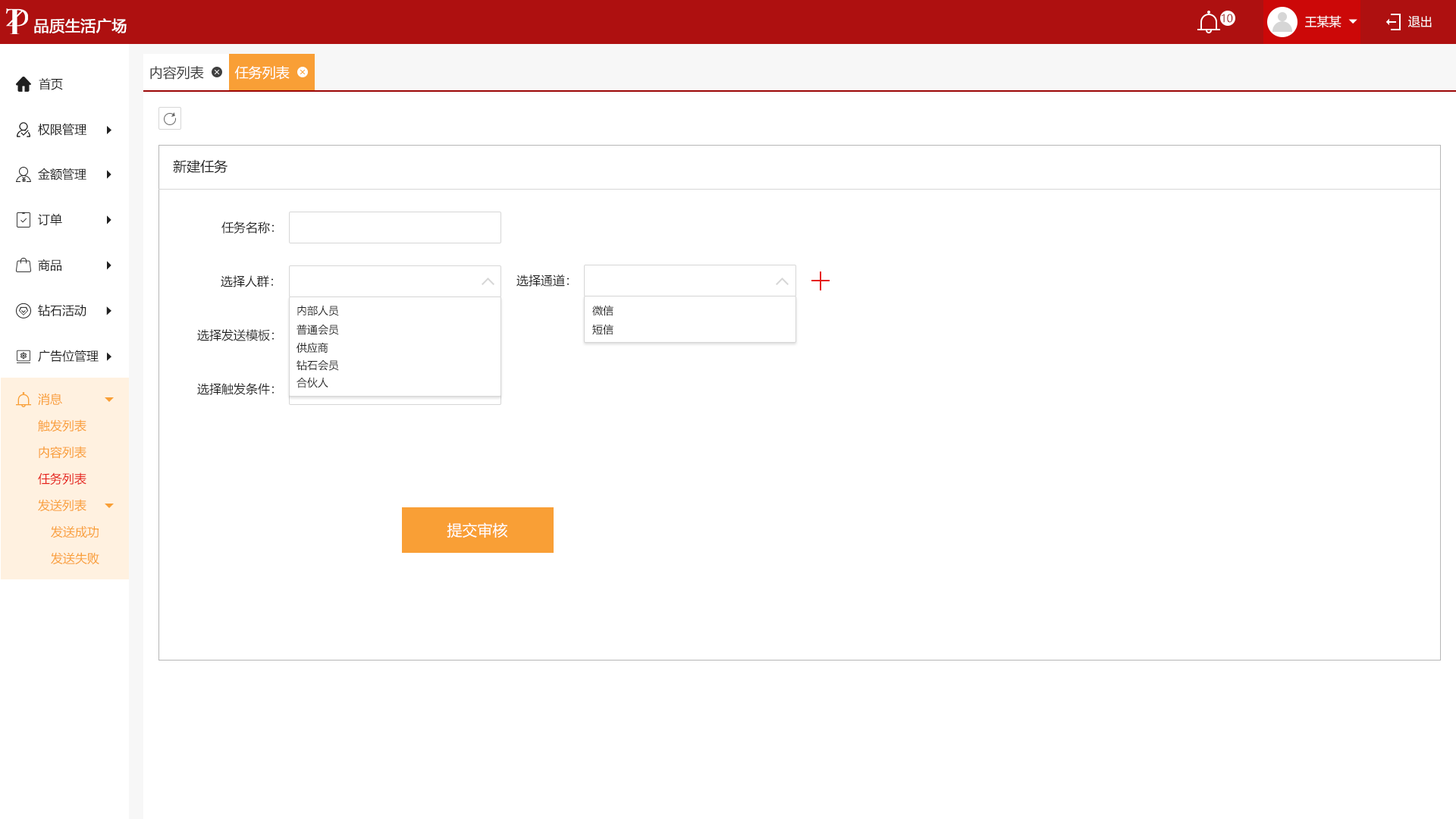
<style>
.page{position:relative;width:1456px;height:819px;background:#ffffff}
.page>*{position:absolute;margin:0}
.t1{font:10.6px "MicrosoftYaHei";color:#9c0606;text-transform:uppercase}
.t2{font:12.1px "MicrosoftYaHei";color:#ffffff;text-transform:uppercase}
.t3{font:15.2px "MicrosoftYaHei";color:#ffffff;text-transform:uppercase;font-weight:bold}
.t4{font:13.6px "MicrosoftYaHei";color:#404040;text-transform:uppercase}
.t5{font:13.6px "MicrosoftYaHei";color:#ffffff;text-transform:uppercase}
.t6{font:12.1px "MicrosoftYaHei";color:#202020;text-transform:uppercase}
.t7{font:13.6px "MicrosoftYaHei";color:#202020;text-transform:uppercase}
.t8{font:10.6px "MicrosoftYaHei";color:#202020;text-transform:uppercase}
.t9{font:12.1px "MicrosoftYaHei";color:#f99f36;text-transform:uppercase}
.t10{font:12.1px "MicrosoftYaHei";color:#e61f18;text-transform:uppercase}
.t11{font:15.2px "MicrosoftYaHei";color:#ffffff}
</style>
<div class="page">
<p class="t1" style="left:1222px;top:14px;width:11px;height:9px">10</p>
<p class="t2" style="left:1305px;top:15px;width:36px;height:13px">王某某</p>
<p class="t2" style="left:1408px;top:16px;width:24px;height:11px">退出</p>
<p class="t3" style="left:34px;top:18px;width:93px;height:15px">品质生活广场</p>
<p class="t4" style="left:150px;top:66px;width:54px;height:14px">内容列表</p>
<p class="t5" style="left:234px;top:66px;width:56px;height:14px">任务列表</p>
<p class="t6" style="left:39px;top:78px;width:24px;height:12px">首页</p>
<p class="t6" style="left:38px;top:123px;width:48px;height:13px">权限管理</p>
<p class="t7" style="left:173px;top:159px;width:55px;height:15px">新建任务</p>
<p class="t6" style="left:38px;top:168px;width:48px;height:12px">金额管理</p>
<p class="t6" style="left:38px;top:213px;width:24px;height:13px">订单</p>
<p class="t6" style="left:221px;top:221px;width:53px;height:13px">任务名称：</p>
<p class="t6" style="left:38px;top:259px;width:23px;height:12px">商品</p>
<p class="t6" style="left:221px;top:275px;width:52px;height:12px">选择人群：</p>
<p class="t6" style="left:516px;top:275px;width:53px;height:12px">选择通道：</p>
<p class="t6" style="left:38px;top:304px;width:48px;height:12px">钻石活动</p>
<p class="t8" style="left:297px;top:305px;width:42px;height:11px">内部人员</p>
<p class="t8" style="left:592px;top:305px;width:21px;height:11px">微信</p>
<p class="t6" style="left:197px;top:329px;width:77px;height:12px">选择发送模板：</p>
<p class="t8" style="left:297px;top:324px;width:42px;height:11px">普通会员</p>
<p class="t8" style="left:592px;top:324px;width:21px;height:11px">短信</p>
<p class="t6" style="left:38px;top:350px;width:61px;height:12px">广告位管理</p>
<p class="t8" style="left:297px;top:342px;width:31px;height:11px">供应商</p>
<p class="t8" style="left:297px;top:360px;width:42px;height:11px">钻石会员</p>
<p class="t8" style="left:297px;top:377px;width:31px;height:11px">合伙人</p>
<p class="t6" style="left:197px;top:383px;width:77px;height:12px">选择触发条件：</p>
<p class="t9" style="left:38px;top:393px;width:24px;height:12px">消息</p>
<p class="t9" style="left:38px;top:419px;width:48px;height:12px">触发列表</p>
<p class="t9" style="left:39px;top:446px;width:47px;height:13px">内容列表</p>
<p class="t10" style="left:38px;top:472px;width:48px;height:13px">任务列表</p>
<p class="t9" style="left:38px;top:499px;width:48px;height:12px">发送列表</p>
<p class="t9" style="left:51px;top:526px;width:48px;height:12px">发送成功</p>
<p class="t11" style="left:447px;top:522px;width:61px;height:16px">提交审核</p>
<p class="t9" style="left:51px;top:552px;width:48px;height:13px">发送失败</p>
</div>
